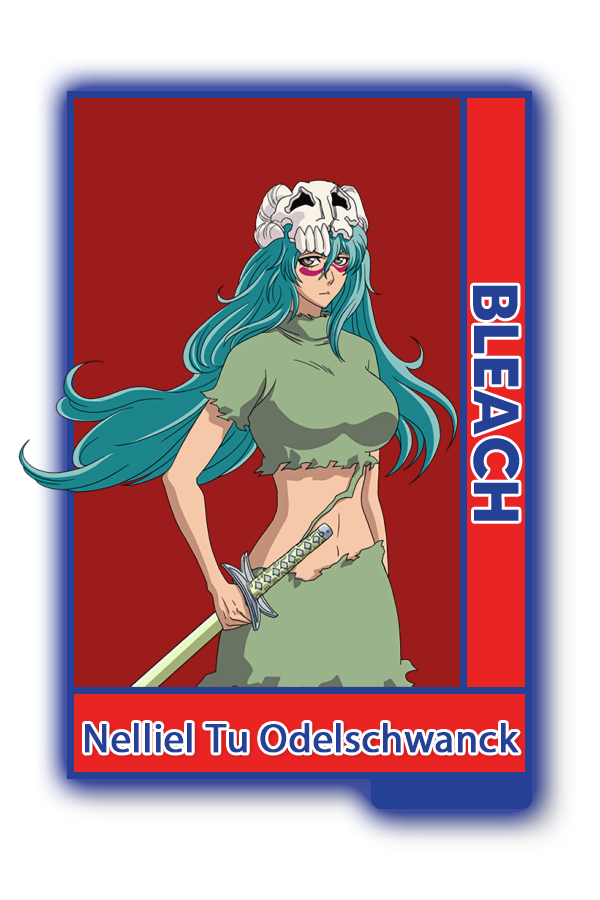
<style>
.page{position:relative;width:600px;height:900px;background:#ffffff}
.page>*{position:absolute;margin:0}
.t1{font:63.6px "MADETOMMY-Bold";color:#254195}
.t2{font:40.4px "MyriadPro-Regular";color:#254195;font-weight:bold}
</style>
<div class="page">
<p class="t1" style="left:473px;top:285px;width:47px;height:236px;rotate:90deg">BLEACH</p>
<p class="t2" style="left:85px;top:723px;width:434px;height:30px">Nelliel Tu Odelschwanck</p>
</div>
